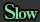
<style>
.page{position:relative;width:40px;height:22px;background:#333333}
.page>*{position:absolute;margin:0}
.t1{font:16px "RyuminPro-ExBold";letter-spacing:-0.08em;color:#90e2a5}
.t2{font:20px "RyuminPro-ExBold";letter-spacing:-0.08em;color:#90e2a5}
</style>
<div class="page">
<p class="t1" style="left:4px;top:4px;width:34px;height:15px"><span class="t2">S</span>low</p>
</div>
